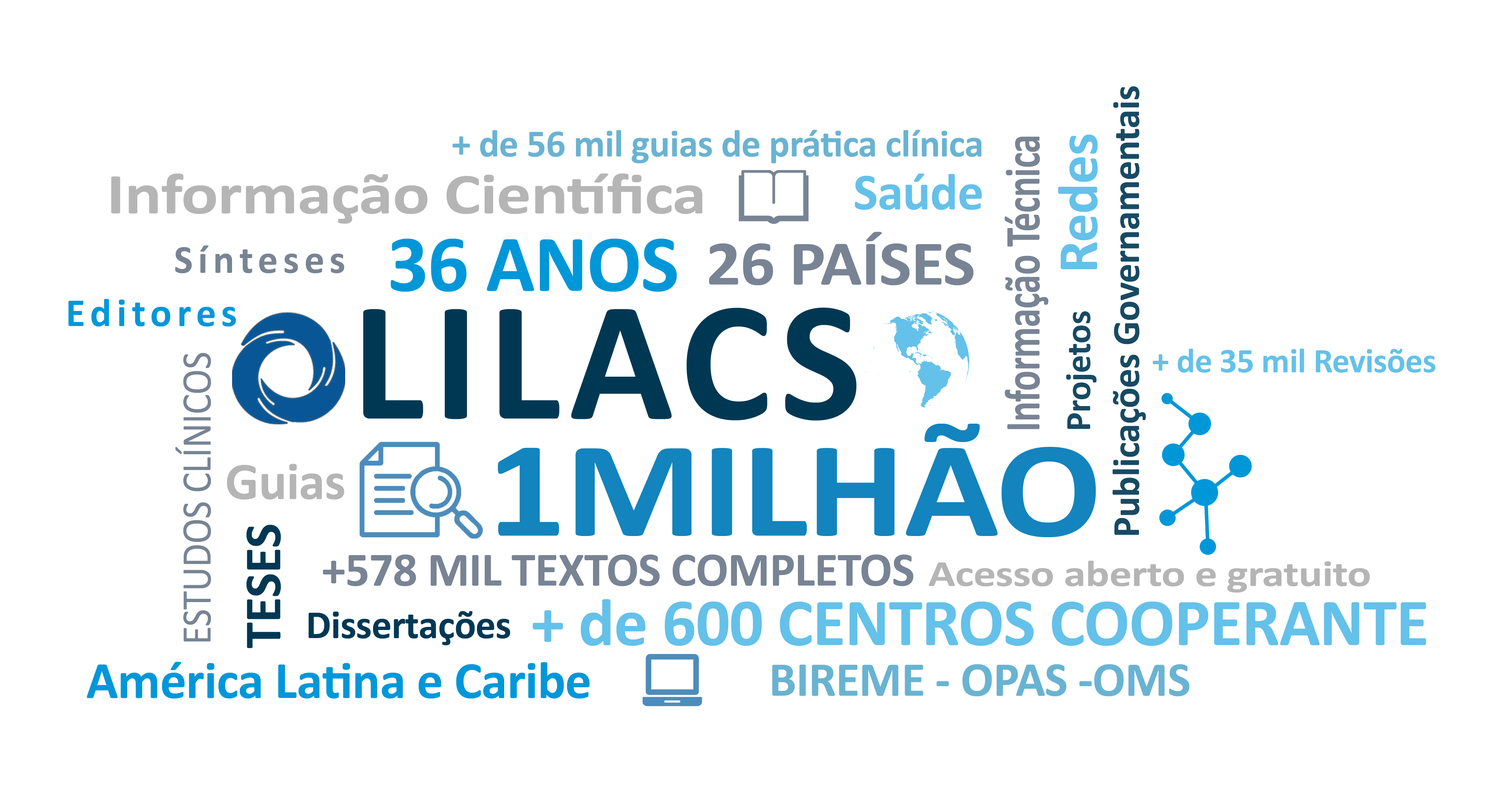
<style>
.page{position:relative;width:1504px;height:793px;background:#ffffff}
.page>*{position:absolute;margin:0}
.t1{font:38.7px "Calibri-Bold";letter-spacing:-0.01em;color:#003854}
.t2{font:38.7px "Calibri-Bold";letter-spacing:-0.01em;color:#5aabce}
.t3{font:50.5px "Calibri-Bold";letter-spacing:-0.01em;color:#788494;scale:0.75 1}
.t4{font:57.3px "Calibri-Bold";letter-spacing:-0.01em;color:#64c1e9}
.t5{font:58.2px "Calibri-Bold";letter-spacing:-0.01em;color:#b5b5b5;scale:1.19 1}
.t6{font:52.1px "Calibri-Bold";letter-spacing:-0.01em;color:#64c1e9}
.t7{font:64px "Calibri-Bold";letter-spacing:-0.01em;color:#788494;scale:1.07 1}
.t8{font:39.9px "Calibri-Bold";letter-spacing:0.13em;color:#788494}
.t9{font:81.1px "Calibri-Bold";letter-spacing:-0.01em;color:#0097d9}
.t10{font:39.9px "Calibri-Bold";letter-spacing:0.13em;color:#0097d9}
.t11{font:172.3px "Calibri-Bold";letter-spacing:0.05em;color:#003854}
.t12{font:36px "Calibri-Bold";letter-spacing:-0.01em;color:#174a63}
.t13{font:42.6px "Calibri";letter-spacing:-0.01em;color:#788494;scale:0.9 1}
.t14{font:34.8px "Calibri-Bold";letter-spacing:-0.01em;color:#64c1e9}
.t15{font:138px "Calibri-Bold";letter-spacing:-0.01em;color:#1384bd;scale:1.14 1}
.t16{font:53px "Calibri-Bold";letter-spacing:-0.01em;color:#b5b5b5}
.t17{font:52.6px "Calibri-Bold";letter-spacing:-0.01em;color:#003854}
.t18{font:48.2px "Calibri-Bold";letter-spacing:-0.01em;color:#788494}
.t19{font:37.1px "Calibri-Bold";letter-spacing:-0.01em;color:#b5b5b5;scale:1.21 1}
.t20{font:67.6px "Calibri-Bold";letter-spacing:-0.01em;color:#64c1e9}
.t21{font:40.1px "Calibri-Bold";letter-spacing:-0.01em;color:#003854}
.t22{font:52.6px "Calibri-Bold";letter-spacing:-0.01em;color:#0097d9}
.t23{font:49px "Calibri-Bold";letter-spacing:-0.01em;color:#5aabce}
</style>
<div class="page">
<p class="t1" style="left:1112px;top:86px;width:34px;height:449px;rotate:-90deg;opacity:0.91">Publicações Governamentais</p>
<p class="t2" style="left:452px;top:130px;width:529px;height:33px;opacity:0.91">+ de 56 mil guias de prática clínica</p>
<p class="t3" style="left:1004px;top:137px;width:44px;height:292px;rotate:-90deg">Informação Técnica</p>
<p class="t4" style="left:1058px;top:134px;width:40px;height:135px;rotate:-90deg">Redes</p>
<p class="t5" style="left:111px;top:173px;width:591px;height:51px">Informação Científica</p>
<p class="t6" style="left:855px;top:173px;width:127px;height:37px">Saúde</p>
<p class="t7" style="left:709px;top:232px;width:264px;height:53px">26 PAÍSES</p>
<p class="t8" style="left:175px;top:245px;width:169px;height:29px">Sínteses</p>
<p class="t9" style="left:391px;top:238px;width:286px;height:54px">36 ANOS</p>
<p class="t10" style="left:68px;top:299px;width:168px;height:28px">Editores</p>
<p class="t11" style="left:363px;top:307px;width:493px;height:114px">LILACS</p>
<p class="t12" style="left:1066px;top:311px;width:31px;height:118px;rotate:-90deg">Projetos</p>
<p class="t13" style="left:175px;top:353px;width:36px;height:289px;rotate:-90deg">ESTUDOS CLÍNICOS</p>
<p class="t14" style="left:1152px;top:348px;width:283px;height:25px">+ de 35 mil Revisões</p>
<p class="t15" style="left:498px;top:424px;width:598px;height:113px">1MILHÃO</p>
<p class="t16" style="left:227px;top:464px;width:117px;height:36px">Guias</p>
<p class="t17" style="left:246px;top:525px;width:35px;height:123px;rotate:-90deg">TESES</p>
<p class="t18" style="left:323px;top:554px;width:590px;height:32px">+578 MIL TEXTOS COMPLETOS</p>
<p class="t19" style="left:928px;top:561px;width:442px;height:32px">Acesso aberto e gratuito</p>
<p class="t20" style="left:532px;top:599px;width:894px;height:47px">+ de 600 CENTROS COOPERANTE</p>
<p class="t21" style="left:308px;top:611px;width:202px;height:34px">Dissertações</p>
<p class="t22" style="left:87px;top:662px;width:503px;height:37px">América Latina e Caribe</p>
<p class="t23" style="left:772px;top:664px;width:417px;height:32px;opacity:0.91">BIREME - OPAS -OMS</p>
</div>
